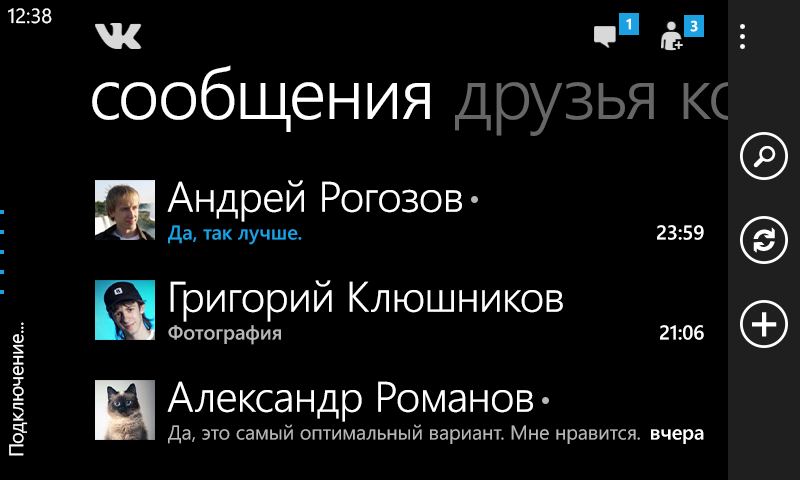
<style>
.page{position:relative;width:800px;height:480px;background:#000000}
.page>*{position:absolute;margin:0}
.t1{font:20.4px "SegoeWP";color:#ffffff}
.t2{font:14.7px "SegoeWP-Bold";color:#ffffff}
.t3{font:42.7px "SegoeWP-SemiLight";letter-spacing:-0.01em;color:#ffffff}
.t4{font:20px "SegoeWP-Semibold";color:#1ba1e2}
.t5{font:20px "SegoeWP-Semibold";letter-spacing:-0.01em;color:#ffffff}
.t6{font:20px "SegoeWP";letter-spacing:-0.025em;color:#ffffff}
</style>
<div class="page">
<p class="t1" style="left:8px;top:8px;width:44px;height:16px">12:38</p>
<p class="t2" style="left:626px;top:18px;width:5px;height:12px">1</p>
<p class="t2" style="left:690px;top:20px;width:8px;height:12px">3</p>
<p class="t3" style="left:167px;top:180px;width:295px;height:42px">Андрей Рогозов</p>
<p class="t4" style="left:168px;top:225px;width:134px;height:20px">Да, так лучше.</p>
<p class="t5" style="left:657px;top:225px;width:47px;height:15px">23:59</p>
<p class="t3" style="left:170px;top:280px;width:393px;height:42px">Григорий Клюшников</p>
<p class="t6" style="left:9px;top:322px;width:19px;height:134px;rotate:-90deg">Подключение...</p>
<p class="t5" style="left:660px;top:325px;width:44px;height:15px">21:06</p>
<p class="t3" style="left:167px;top:381px;width:366px;height:41px">Александр Романов</p>
<p class="t5" style="left:651px;top:429px;width:53px;height:15px">вчера</p>
</div>
